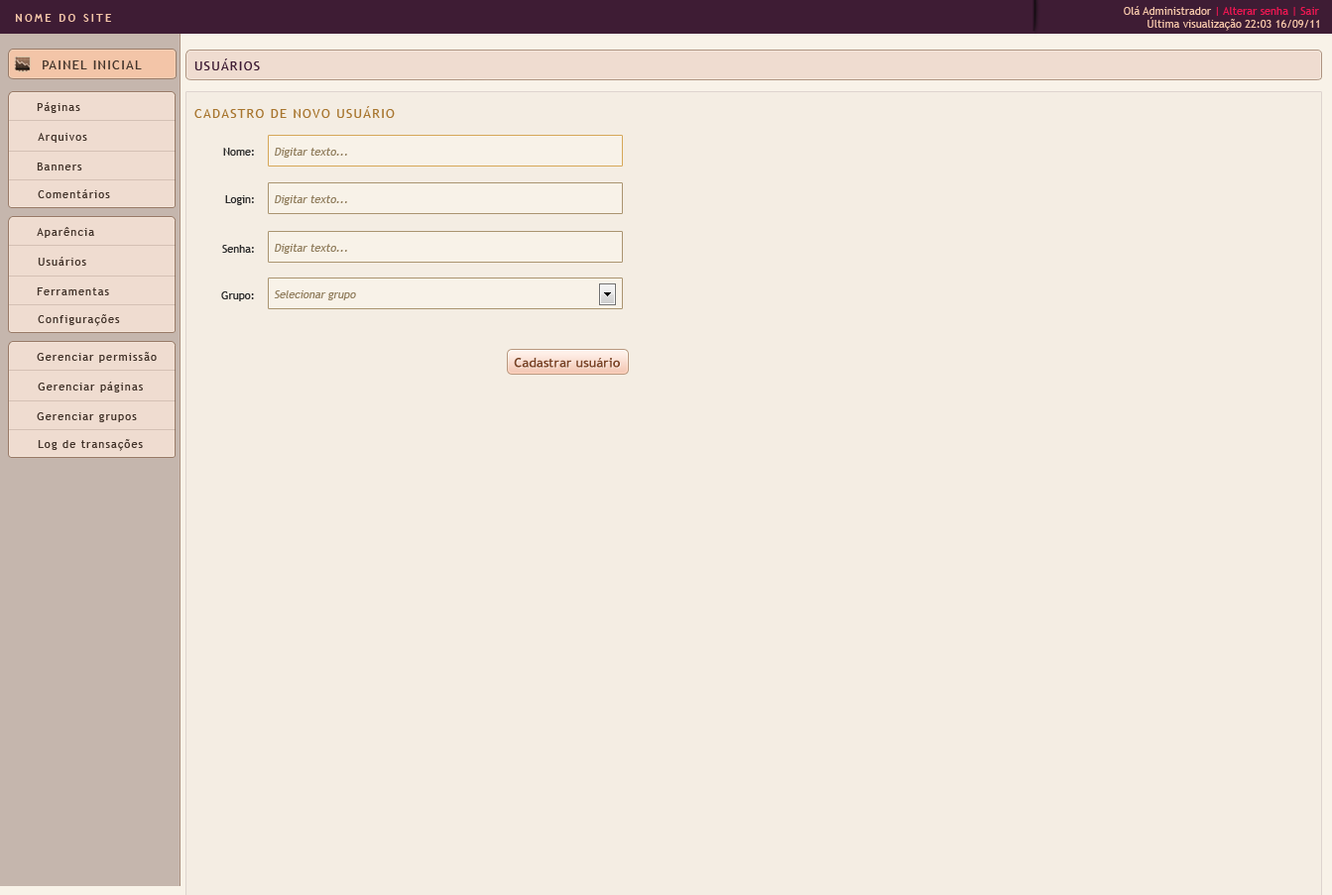
<style>
.page{position:relative;width:1332px;height:895px;background:#f4ede3}
.page>*{position:absolute;margin:0}
.t1{font:10.9px "TrebuchetMS";color:#ed1651}
.t2{font:10.9px "TrebuchetMS";color:#f3c5a8}
.t3{font:10.9px "TrebuchetMS-Bold";letter-spacing:0.2em;color:#f3c5a8;text-transform:uppercase}
.t4{font:12.9px "TrebuchetMS";letter-spacing:0.1em;color:#43342b;text-transform:uppercase}
.t5{font:12.9px "TrebuchetMS";letter-spacing:0.1em;color:#3e1c34;text-transform:uppercase}
.t6{font:10.9px "TrebuchetMS";letter-spacing:0.1em;color:#43342b}
.t7{font:12.9px "TrebuchetMS";letter-spacing:0.1em;color:#a8762f;text-transform:uppercase}
.t8{font:10.9px "TrebuchetMS";color:#2b2b2b}
.t9{font:10.9px "TrebuchetMS";color:#938061;font-style:italic}
.t10{font:10.9px "TrebuchetMS";color:#938060;font-style:italic}
.t11{font:12.9px "TrebuchetMS-Bold";color:#7a4427}
</style>
<div class="page">
<p class="t1" style="left:1123px;top:6px;width:196px;height:10px"><span class="t2">Olá Administrador </span>| Alterar senha | Sair</p>
<p class="t3" style="left:15px;top:14px;width:96px;height:8px">Nome do site</p>
<p class="t2" style="left:1147px;top:17px;width:172px;height:14px">Última visualização 22:03 16/09/11</p>
<p class="t4" style="left:43px;top:60px;width:99px;height:9px">Painel Inicial</p>
<p class="t5" style="left:194px;top:59px;width:66px;height:11px">USUÁRIOS</p>
<p class="t6" style="left:37px;top:102px;width:43px;height:11px">Páginas</p>
<p class="t7" style="left:194px;top:106px;width:201px;height:12px">cadastro de novo usuário</p>
<p class="t6" style="left:38px;top:133px;width:49px;height:10px">Arquivos</p>
<p class="t8" style="left:223px;top:148px;width:31px;height:8px">Nome:</p>
<p class="t9" style="left:275px;top:148px;width:72px;height:10px">Digitar texto...</p>
<p class="t6" style="left:37px;top:163px;width:45px;height:8px">Banners</p>
<p class="t6" style="left:38px;top:189px;width:72px;height:9px">Comentários</p>
<p class="t8" style="left:225px;top:195px;width:29px;height:10px">Login:</p>
<p class="t10" style="left:275px;top:195px;width:72px;height:10px">Digitar texto...</p>
<p class="t6" style="left:37px;top:227px;width:57px;height:11px">Aparência</p>
<p class="t8" style="left:222px;top:245px;width:32px;height:8px">Senha:</p>
<p class="t10" style="left:275px;top:244px;width:72px;height:10px">Digitar texto...</p>
<p class="t6" style="left:38px;top:257px;width:48px;height:9px">Usuários</p>
<p class="t6" style="left:37px;top:288px;width:72px;height:7px">Ferramentas</p>
<p class="t8" style="left:221px;top:292px;width:33px;height:9px">Grupo:</p>
<p class="t10" style="left:274px;top:291px;width:82px;height:9px">Selecionar grupo</p>
<p class="t6" style="left:38px;top:314px;width:82px;height:12px">Configurações</p>
<p class="t6" style="left:37px;top:352px;width:120px;height:11px">Gerenciar permissão</p>
<p class="t11" style="left:514px;top:357px;width:106px;height:11px">Cadastrar usuário</p>
<p class="t6" style="left:38px;top:382px;width:105px;height:11px">Gerenciar páginas</p>
<p class="t6" style="left:37px;top:413px;width:100px;height:9px">Gerenciar grupos</p>
<p class="t6" style="left:38px;top:439px;width:105px;height:12px">Log de transações</p>
</div>
